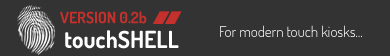
<style>
.page{position:relative;width:390px;height:56px;background:#333333}
.page>*{position:absolute;margin:0}
.t1{font:15.7px "Dosis-Bold";color:#c4302b}
.t2{font:23.5px "Dosis-Bold";color:#ffffff}
.t3{font:14.9px "Dosis-Light";color:#ffffff}
</style>
<div class="page">
<p class="t1" style="left:60px;top:11px;width:87px;height:13px">VERSION 0.2b</p>
<p class="t2" style="left:65px;top:30px;width:114px;height:19px">touchSHELL</p>
<p class="t3" style="left:220px;top:25px;width:142px;height:12px">For modern touch kiosks...</p>
</div>
